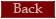
<style>
.page{position:relative;width:56px;height:19px;background:#7a0001}
.page>*{position:absolute;margin:0}
.t1{font:14px "BookAntiqua";color:#d2a8a8}
</style>
<div class="page">
<p class="t1" style="left:13px;top:3px;width:30px;height:10px">Back</p>
</div>
